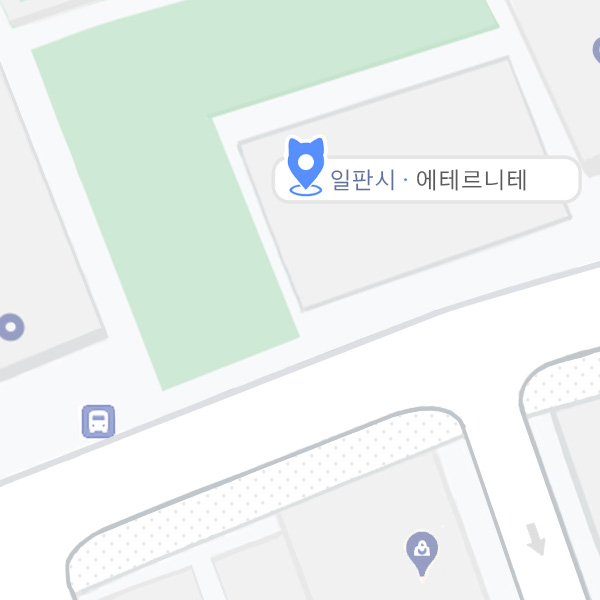
<style>
.page{position:relative;width:600px;height:600px;background:#ffffff}
.page>*{position:absolute;margin:0}
.t1{font:23px "TTMGothicR";letter-spacing:0.04em;color:#60719d}
.t2{font:23px "TTMGothicR";letter-spacing:0.04em;color:#5b5b5b}
</style>
<div class="page">
<p class="t1" style="left:331px;top:169px;width:63px;height:22px">일판시</p>
<p class="t2" style="left:417px;top:169px;width:109px;height:22px">에테르니테</p>
</div>
